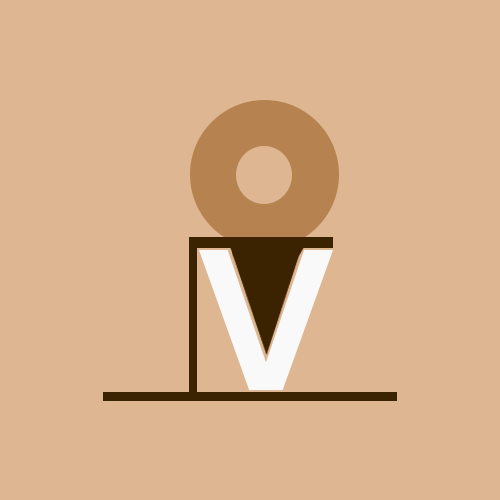
<style>
.page{position:relative;width:500px;height:500px;background:#deb691}
.page>*{position:absolute;margin:0}
.t1{font:200px "MADETOMMY-Medium";color:#f7f7f7}
</style>
<div class="page">
<p class="t1" style="left:199px;top:250px;width:134px;height:141px">V</p>
</div>
